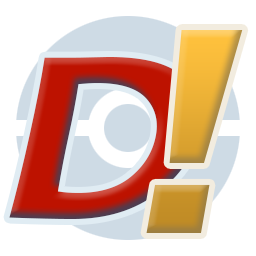
<style>
.page{position:relative;width:256px;height:256px;background:#ffffff}
.page>*{position:absolute;margin:0}
.t1{font:254px "Candara-Bold";font-style:italic;scale:1.25 1}
</style>
<div class="page">
<p class="t1" style="left:9px;top:57px;width:192px;height:162px">D</p>
</div>
